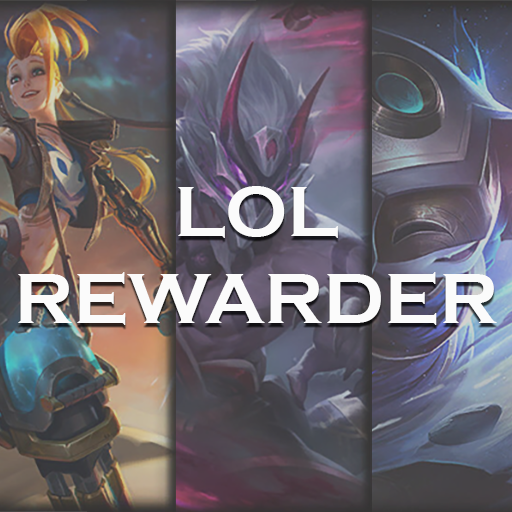
<style>
.page{position:relative;width:512px;height:512px}
.page>*{position:absolute;margin:0}
.t1{font:72.7px "CopperplateGothic-Bold";color:#fbfbfb}
</style>
<div class="page">
<p class="t1" style="left:18px;top:186px;width:479px;height:139px;text-align:center">LOL<br>REWARDER</p>
</div>
